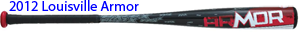
<style>
.page{position:relative;width:300px;height:32px;background:#ffffff}
.page>*{position:absolute;margin:0}
.t1{font:14.2px "MyriadPro-Regular";color:#0000ff}
</style>
<div class="page">
<p class="t1" style="left:9px;top:0px;width:130px;height:11px">2012 Louisville Armor</p>
</div>
